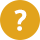
<style>
.page{position:relative;width:40px;height:40px;background:#e2a31c}
.page>*{position:absolute;margin:0}
.t1{font:29px "PTSans-Bold";color:#ffffff}
</style>
<div class="page">
<p class="t1" style="left:14px;top:9px;width:13px;height:22px">?</p>
</div>
